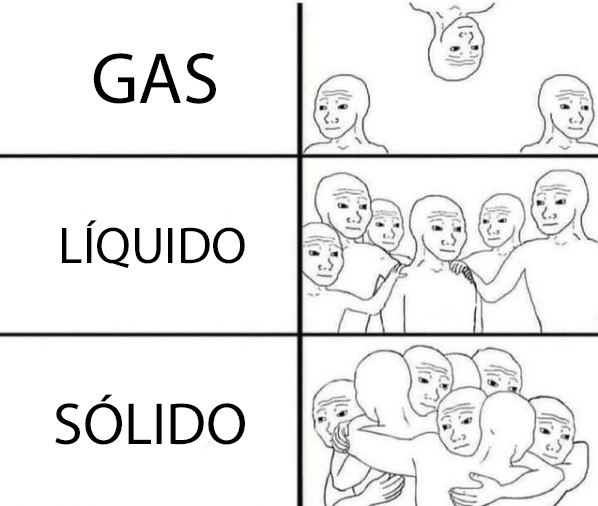
<style>
.page{position:relative;width:598px;height:506px;background:#ffffff}
.page>*{position:absolute;margin:0}
.t1{font:73.2px "MyriadPro-Regular";color:#000000}
.t2{font:51.8px "MyriadPro-Regular";color:#000000}
.t3{font:59.8px "MyriadPro-Regular";color:#000000}
</style>
<div class="page">
<p class="t1" style="left:93px;top:53px;width:123px;height:51px">GAS</p>
<p class="t2" style="left:62px;top:220px;width:183px;height:48px">LÍQUIDO</p>
<p class="t3" style="left:55px;top:394px;width:190px;height:51px">SÓLIDO</p>
</div>
